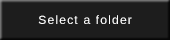
<style>
.page{position:relative;width:170px;height:40px;background:#1d1d1d}
.page>*{position:absolute;margin:0}
.t1{font:12px "LiberationSans";letter-spacing:0.1em;color:#ffffff}
</style>
<div class="page">
<p class="t1" style="left:38px;top:15px;width:94px;height:9px">Select a folder</p>
</div>
